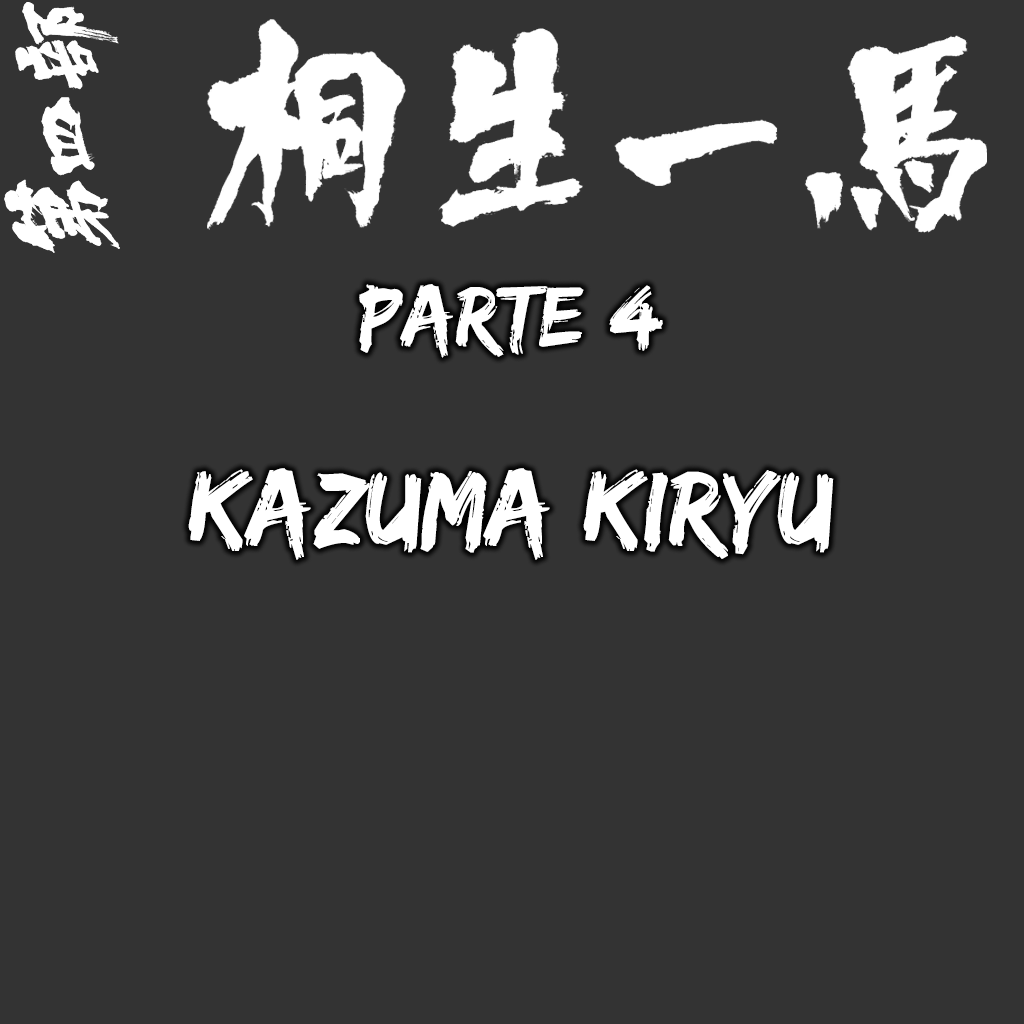
<style>
.page{position:relative;width:1024px;height:1024px;background:#333333}
.page>*{position:absolute;margin:0}
.t1{font:88.5px "EdoSZ";color:#ffffff}
.t2{font:109.9px "EdoSZ";color:#ffffff}
</style>
<div class="page">
<p class="t1" style="left:359px;top:284px;width:304px;height:74px">parte 4</p>
<p class="t2" style="left:188px;top:468px;width:646px;height:92px">Kazuma Kiryu</p>
</div>
